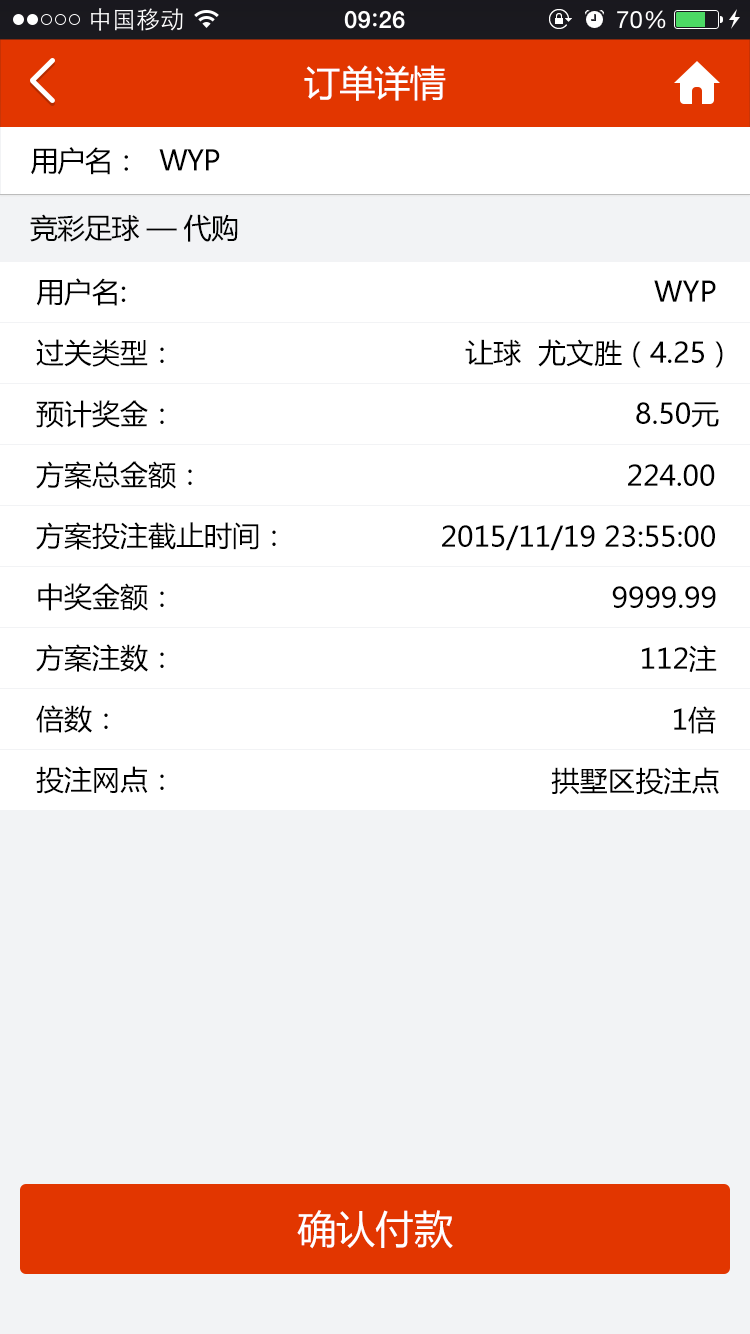
<style>
.page{position:relative;width:750px;height:1334px;background:#ffffff}
.page>*{position:absolute;margin:0}
.t1{font:36px "MicrosoftYaHei";letter-spacing:-0.025em;color:#ffffff}
.t2{font:28px "MicrosoftYaHei";letter-spacing:-0.025em;color:#000000}
.t3{font:28px "MicrosoftYaHei";color:#000000}
.t4{font:39px "MicrosoftYaHei";color:#ffffff}
</style>
<div class="page">
<p class="t1" style="left:304px;top:65px;width:142px;height:36px">订单详情</p>
<p class="t2" style="left:31px;top:147px;width:97px;height:28px">用户名：</p>
<p class="t2" style="left:159px;top:149px;width:61px;height:22px">WYP</p>
<p class="t2" style="left:30px;top:214px;width:208px;height:28px">竞彩足球 — 代购</p>
<p class="t3" style="left:36px;top:278px;width:90px;height:28px">用户名:</p>
<p class="t3" style="left:654px;top:280px;width:62px;height:22px">WYP</p>
<p class="t3" style="left:36px;top:339px;width:128px;height:28px">过关类型：</p>
<p class="t3" style="left:465px;top:339px;width:258px;height:29px">让球  尤文胜（4.25）</p>
<p class="t3" style="left:36px;top:400px;width:128px;height:28px">预计奖金：</p>
<p class="t3" style="left:636px;top:402px;width:83px;height:26px">8.50元</p>
<p class="t3" style="left:36px;top:461px;width:156px;height:28px">方案总金额：</p>
<p class="t3" style="left:628px;top:464px;width:87px;height:22px">224.00</p>
<p class="t3" style="left:36px;top:522px;width:240px;height:28px">方案投注截止时间：</p>
<p class="t3" style="left:442px;top:525px;width:273px;height:26px">2015/11/19 23:55:00</p>
<p class="t3" style="left:38px;top:583px;width:126px;height:28px">中奖金额：</p>
<p class="t3" style="left:612px;top:586px;width:104px;height:22px">9999.99</p>
<p class="t3" style="left:36px;top:644px;width:128px;height:28px">方案注数：</p>
<p class="t3" style="left:642px;top:645px;width:75px;height:28px">112注</p>
<p class="t3" style="left:36px;top:705px;width:72px;height:28px">倍数：</p>
<p class="t3" style="left:674px;top:706px;width:42px;height:28px">1倍</p>
<p class="t3" style="left:36px;top:766px;width:128px;height:28px">投注网点：</p>
<p class="t3" style="left:551px;top:767px;width:168px;height:28px">拱墅区投注点</p>
<p class="t4" style="left:297px;top:1210px;width:156px;height:39px">确认付款</p>
</div>
